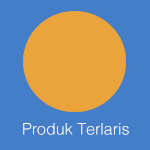
<style>
.page{position:relative;width:150px;height:150px;background:#447dc8}
.page>*{position:absolute;margin:0}
.t1{font:16px "Helvetica-Light";color:#ffffff}
</style>
<div class="page">
<p class="t1" style="left:23px;top:123px;width:106px;height:12px">Produk Terlaris</p>
</div>
